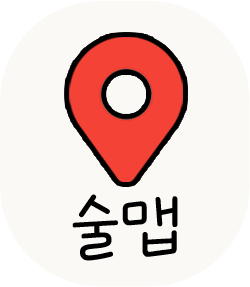
<style>
.page{position:relative;width:250px;height:287px;background:#fbf9f5}
.page>*{position:absolute;margin:0}
.t1{font:91.7px "GangwonEduSaeeumMedium";color:#000000}
</style>
<div class="page">
<p class="t1" style="left:72px;top:194px;width:106px;height:67px">술맵</p>
</div>
